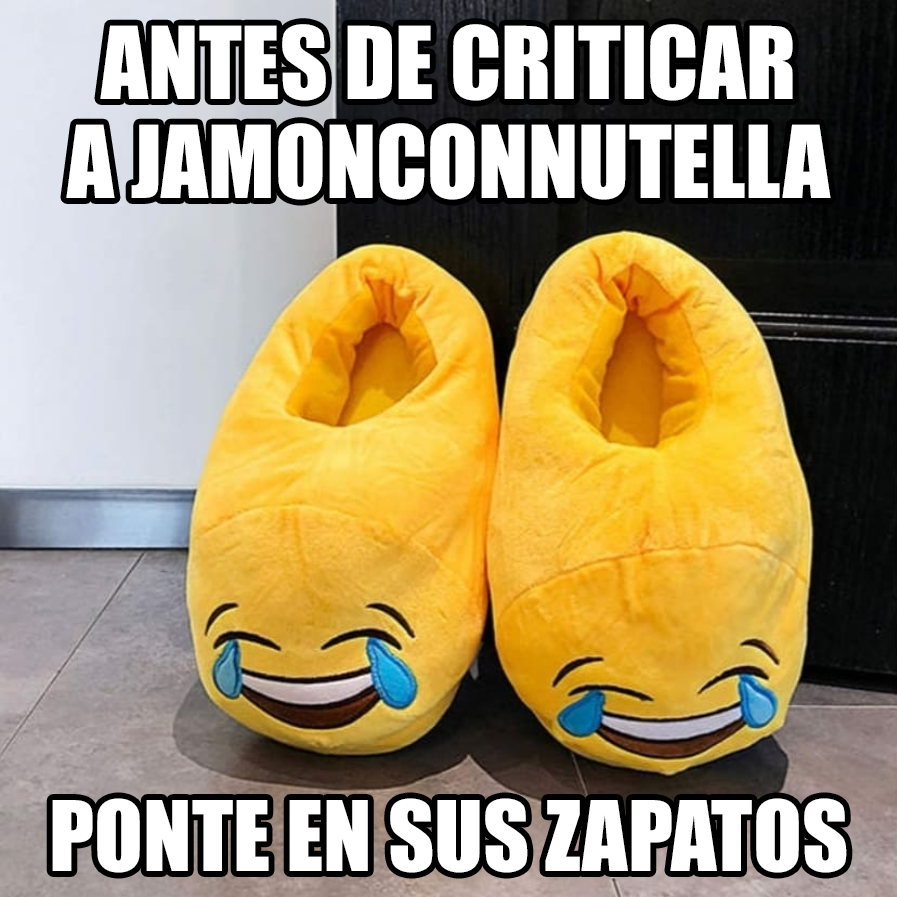
<style>
.page{position:relative;width:897px;height:897px}
.page>*{position:absolute;margin:0}
.t1{font:92.6px "Impact";color:#ffffff}
.t2{font:89.6px "Impact";color:#ffffff}
</style>
<div class="page">
<p class="t1" style="left:66px;top:24px;width:765px;height:176px;text-align:center">ANTES DE CRITICAR<br>A JAMONCONNUTELLA</p>
<p class="t2" style="left:52px;top:798px;width:795px;height:75px">PONTE EN SUS ZAPATOS</p>
</div>
